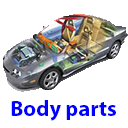
<style>
.page{position:relative;width:128px;height:128px;background:#ffffff}
.page>*{position:absolute;margin:0}
.t1{font:22px "MyriadPro-Bold";color:#0000ff}
</style>
<div class="page">
<p class="t1" style="left:11px;top:100px;width:105px;height:21px">Body parts</p>
</div>
